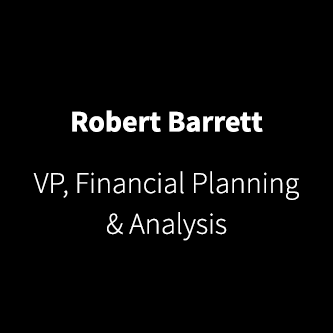
<style>
.page{position:relative;width:333px;height:333px;background:#000000}
.page>*{position:absolute;margin:0}
.t1{font:29.9px "SourceSansPro-Bold";color:#ffffff}
.t2{font:29.9px/40.7px "SourceSansPro-Light";color:#ffffff}
</style>
<div class="page">
<p class="t1" style="left:72px;top:110px;width:191px;height:22px">Robert Barrett</p>
<p class="t2" style="left:33px;top:171px;width:266px;height:70px;text-align:center">VP, Financial Planning &amp; Analysis</p>
</div>
